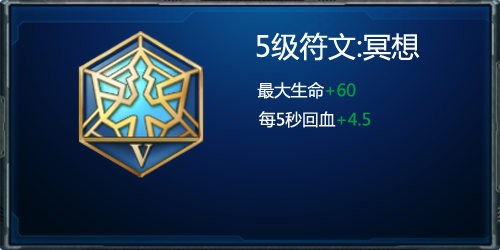
<style>
.page{position:relative;width:500px;height:250px}
.page>*{position:absolute;margin:0}
.t1{font:28.3px "MicrosoftYaHei";color:#f7faf8}
.t2{font:16.7px "MicrosoftYaHei";color:#f7faf8}
.t3{font:16.7px "MicrosoftYaHei";color:#009944}
</style>
<div class="page">
<p class="t1" style="left:256px;top:32px;width:164px;height:96px;text-align:center">5级符文:冥想<br><span class="t2">        最大生命</span><span class="t3">+60<br></span><span class="t2">  每5秒回血</span><span class="t3">+4.5</span></p>
</div>
